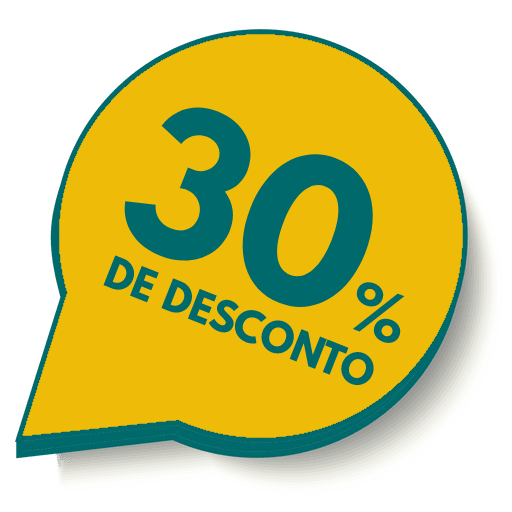
<style>
.page{position:relative;width:512px;height:512px;background:#eebc08}
.page>*{position:absolute;margin:0}
.t1{font:42.6px "SpartanMB-ExtraBold";color:#00696b}
.t2{font:199.6px "SpartanMB-ExtraBold";color:#00696b}
.t3{font:65.8px "SpartanMB-ExtraBold";color:#00696b}
</style>
<div class="page">
<p class="t1" style="left:103px;top:102px;width:302px;height:286px;text-align:center;rotate:22deg"><span class="t2">30</span><span class="t3">%<br></span>DE DESCONTO</p>
</div>
